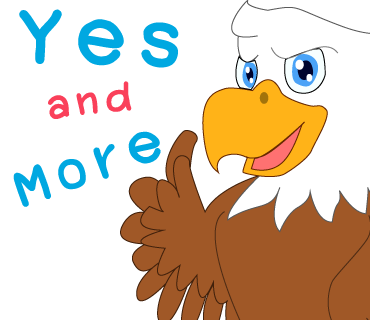
<style>
.page{position:relative;width:370px;height:320px;background:#ffffff}
.page>*{position:absolute;margin:0}
.t1{font:144px "2005_iannnnnMTV";letter-spacing:0.075em;color:#00a8e1;scale:1.06 1}
.t2{font:71px "2005_iannnnnMTV";letter-spacing:0.075em;color:#fa405a;scale:1.06 1}
.t3{font:100px "2005_iannnnnMTV";letter-spacing:0.075em;color:#00a8e1;scale:1.06 1}
</style>
<div class="page">
<p class="t1" style="left:19px;top:9px;width:160px;height:59px;rotate:3deg">Yes</p>
<p class="t2" style="left:48px;top:81px;width:84px;height:38px;rotate:-6deg">and</p>
<p class="t3" style="left:13px;top:131px;width:148px;height:76px;rotate:-19deg">More</p>
</div>
